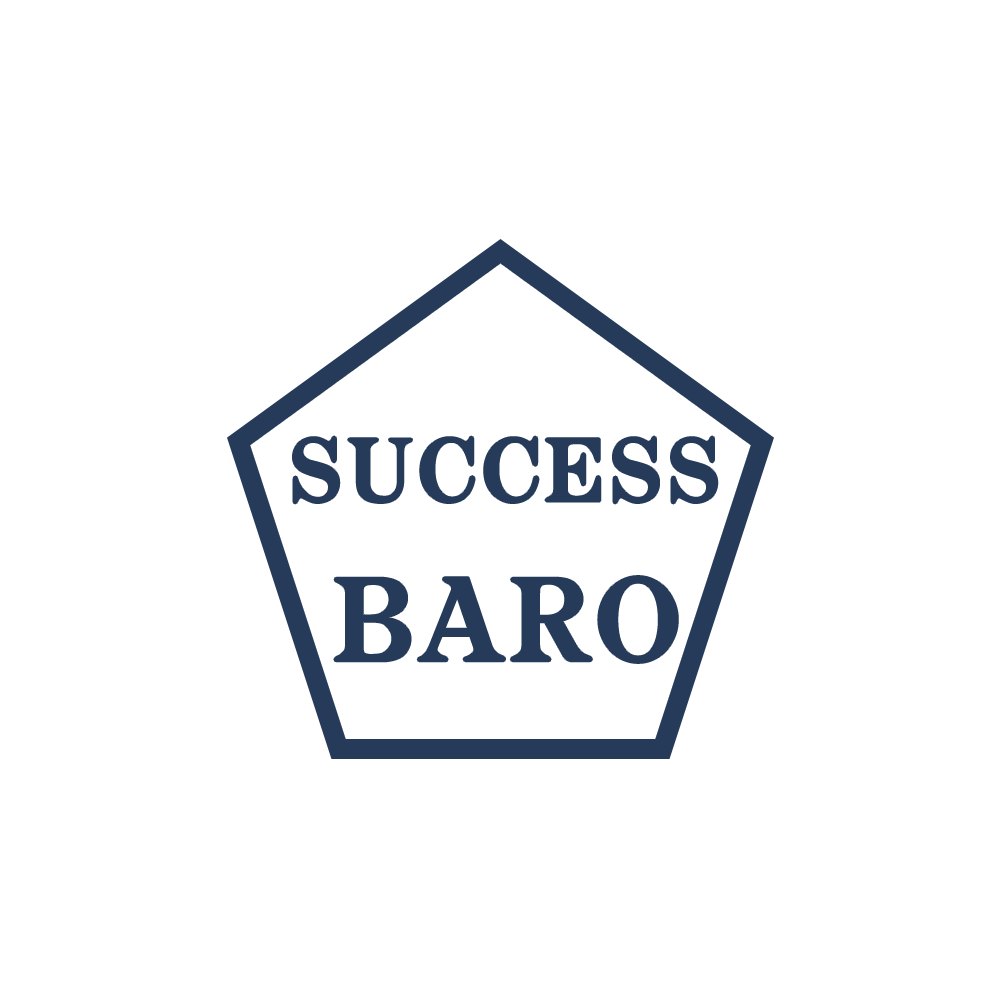
<style>
.page{position:relative;width:1000px;height:1000px;background:#ffffff}
.page>*{position:absolute;margin:0}
.t1{font:83px "HaanSollipB";color:#253b59}
.t2{font:110px "HaanSollipB";color:#253b59}
</style>
<div class="page">
<p class="t1" style="left:293px;top:436px;width:425px;height:68px">SUCCESS</p>
<p class="t2" style="left:334px;top:576px;width:344px;height:87px">BARO</p>
</div>
